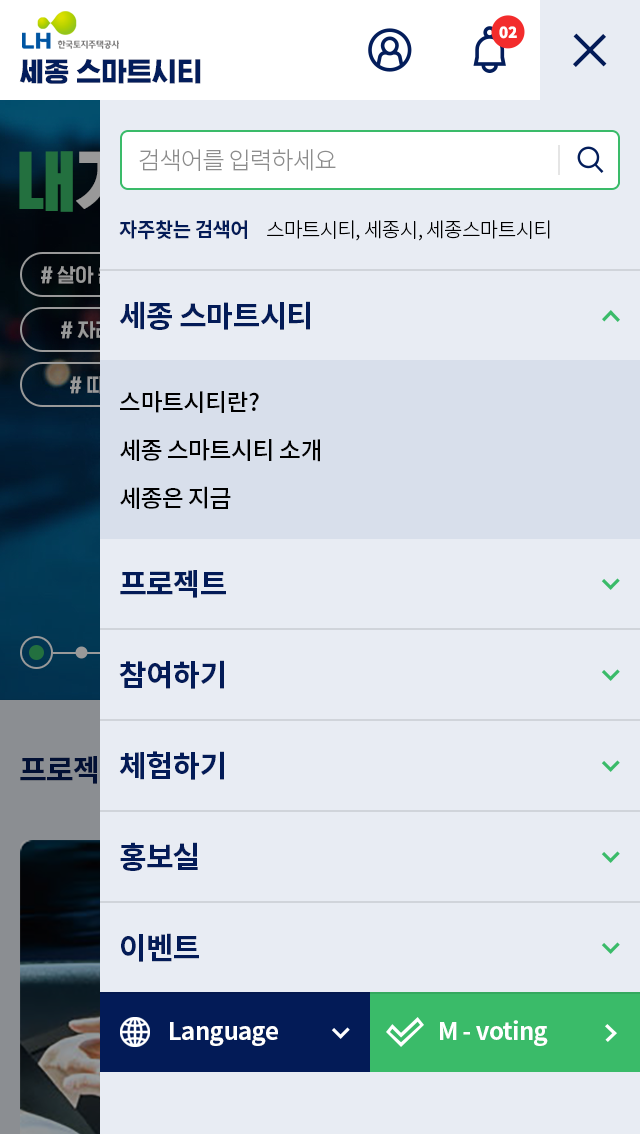
<style>
.page{position:relative;width:640px;height:1134px;background:#e8ecf3}
.page>*{position:absolute;margin:0}
.t1{font:15px "NotoSansKR-Black";color:#ffffff}
.t2{font:28px "HGGGothicssi99g";color:#031d5b}
.t3{font:24px "NotoSansKR-Light";letter-spacing:-0.025em;color:#8d8d8d}
.t4{font:20px "NotoSansKR-Bold";letter-spacing:-0.025em;color:#031b57}
.t5{font:20px "NotoSansKR-Light";letter-spacing:-0.025em;color:#000000}
.t6{font:30px "NotoSansKR-Bold";letter-spacing:-0.025em;color:#031b57}
.t7{font:24px/48px "NotoSansKR-Medium";letter-spacing:-0.025em;color:#000000}
.t8{font:24px "NotoSansKR-Bold";letter-spacing:-0.025em;color:#ffffff}
</style>
<div class="page">
<p class="t1" style="left:499px;top:26px;width:18px;height:13px">02</p>
<p class="t2" style="left:19px;top:59px;width:182px;height:25px">세종 스마트시티</p>
<p class="t3" style="left:139px;top:149px;width:197px;height:23px">검색어를 입력하세요</p>
<p class="t4" style="left:119px;top:220px;width:128px;height:20px">자주찾는 검색어</p>
<p class="t5" style="left:267px;top:220px;width:283px;height:21px">스마트시티, 세종시, 세종스마트시티</p>
<p class="t6" style="left:119px;top:301px;width:191px;height:29px">세종 스마트시티</p>
<p class="t7" style="left:120px;top:391px;width:200px;height:118px">스마트시티란?<br>세종 스마트시티 소개<br>세종은 지금</p>
<p class="t6" style="left:120px;top:570px;width:106px;height:28px">프로젝트</p>
<p class="t6" style="left:119px;top:660px;width:105px;height:29px">참여하기</p>
<p class="t6" style="left:119px;top:751px;width:105px;height:29px">체험하기</p>
<p class="t6" style="left:120px;top:842px;width:78px;height:29px">홍보실</p>
<p class="t6" style="left:121px;top:933px;width:78px;height:29px">이벤트</p>
<p class="t8" style="left:170px;top:1022px;width:108px;height:24px">Language</p>
<p class="t8" style="left:440px;top:1020px;width:108px;height:26px">M - voting</p>
</div>
